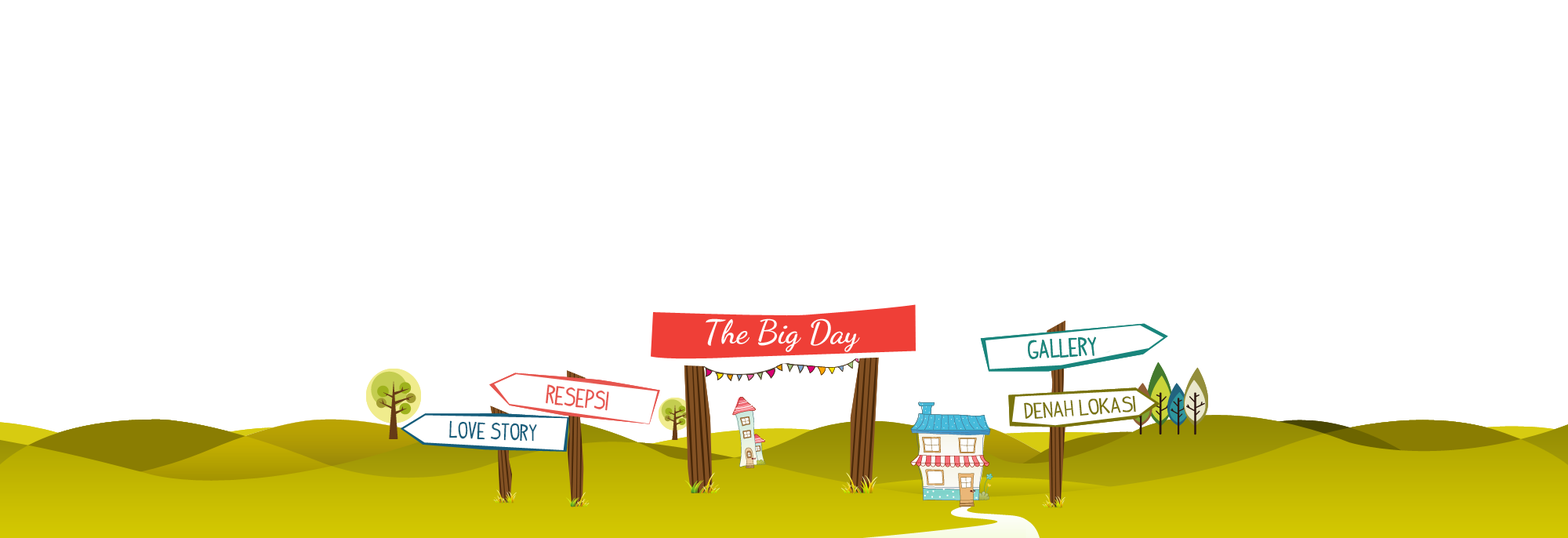
<style>
.page{position:relative;width:1568px;height:538px;background:#ffffff}
.page>*{position:absolute;margin:0}
.t1{font:20.5px "IndyPimp";color:#19857c;scale:0.95 1}
.t2{font:20.7px "IndyPimp";color:#e6554e;scale:0.95 1}
.t3{font:17.5px "IndyPimp";color:#79730d;scale:1.12 1}
.t4{font:18.4px "IndyPimp";color:#155d7b}
</style>
<div class="page">
<p class="t1" style="left:1028px;top:336px;width:68px;height:23px;rotate:-3deg">gallery</p>
<p class="t1" style="left:1028px;top:336px;width:68px;height:23px;rotate:-3deg">gallery</p>
<p class="t2" style="left:546px;top:384px;width:63px;height:27px;rotate:6deg">Resepsi</p>
<p class="t3" style="left:1024px;top:395px;width:112px;height:24px;rotate:-4deg">Denah lokasi</p>
<p class="t4" style="left:449px;top:420px;width:88px;height:21px;rotate:2deg">Love Story</p>
</div>
